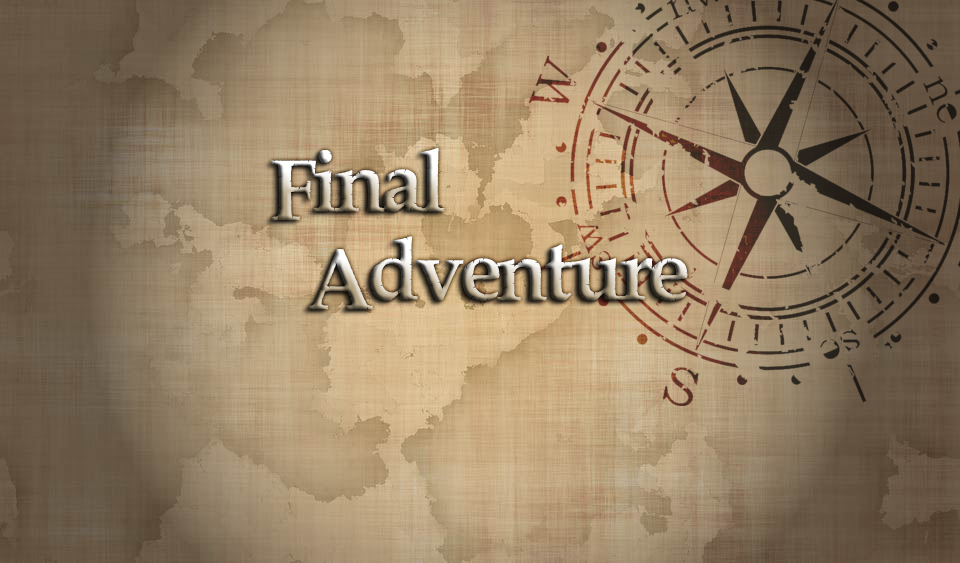
<style>
.page{position:relative;width:960px;height:563px}
.page>*{position:absolute;margin:0}
.t1{font:90px "PiratesBay"}
</style>
<div class="page">
<p class="t1" style="left:271px;top:148px;width:174px;height:73px">Final</p>
<p class="t1" style="left:308px;top:236px;width:380px;height:74px">Adventure</p>
</div>
